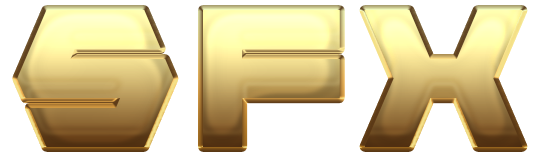
<style>
.page{position:relative;width:547px;height:156px;background:#ffffff}
.page>*{position:absolute;margin:0}
.t1{font:200px "Diagon";letter-spacing:0.15em}
</style>
<div class="page">
<p class="t1" style="left:17px;top:10px;width:506px;height:137px">Sfx</p>
</div>
